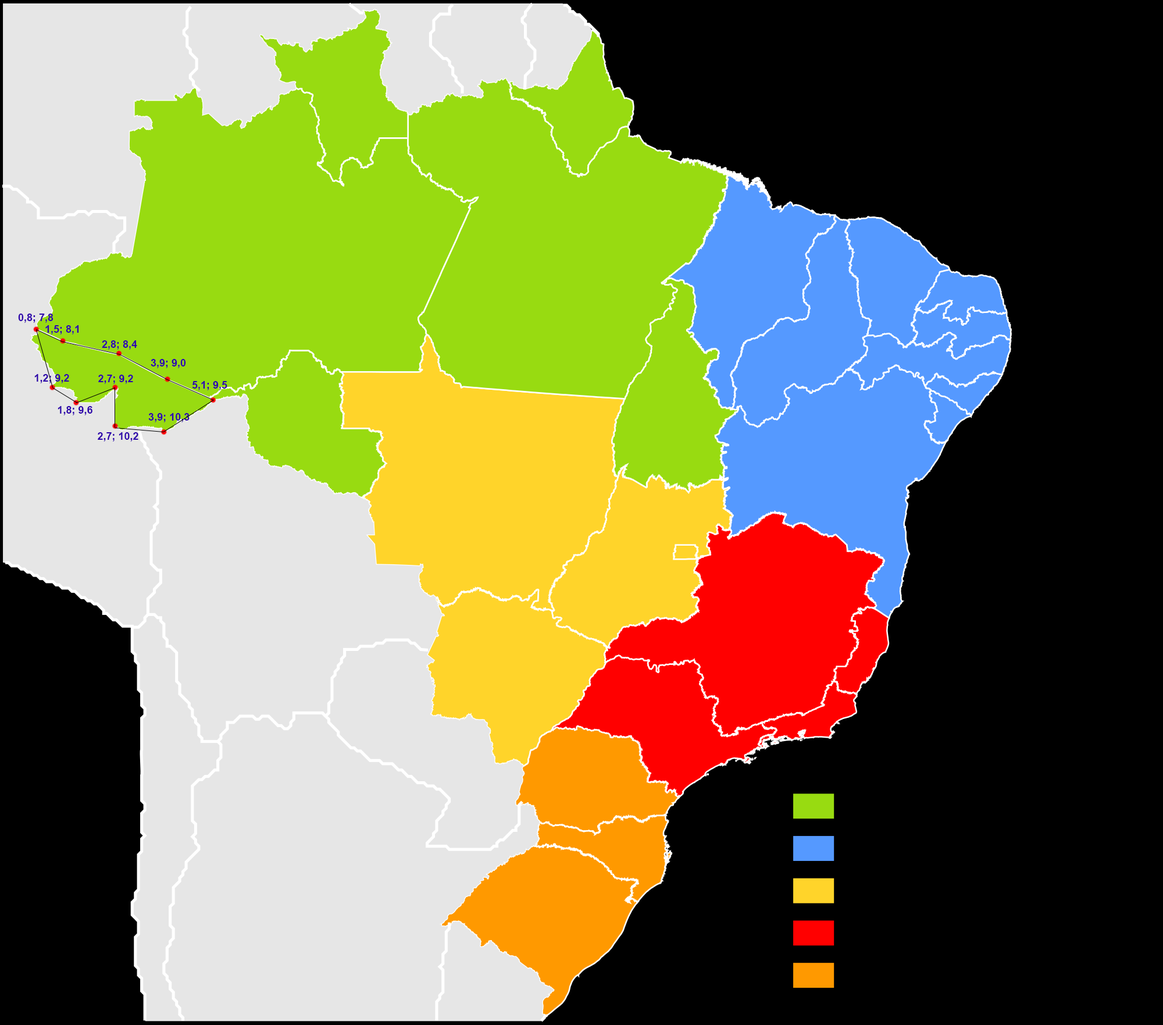
<style>
.page{position:relative;width:1163px;height:1025px;background:#000000}
.page>*{position:absolute;margin:0}
.t1{font:10.5px "Arial-BoldMT";color:#2f03ab}
</style>
<div class="page">
<p class="t1" style="left:18px;top:314px;width:36px;height:9px">0,8; 7,8</p>
<p class="t1" style="left:45px;top:325px;width:34px;height:9px">1,5; 8,1</p>
<p class="t1" style="left:102px;top:340px;width:35px;height:10px">2,8; 8,4</p>
<p class="t1" style="left:151px;top:359px;width:35px;height:9px">3,9; 9,0</p>
<p class="t1" style="left:34px;top:374px;width:35px;height:9px">1,2; 9,2</p>
<p class="t1" style="left:98px;top:375px;width:35px;height:9px">2,7; 9,2</p>
<p class="t1" style="left:192px;top:381px;width:35px;height:9px">5,1; 9,5</p>
<p class="t1" style="left:58px;top:406px;width:34px;height:9px">1,8; 9,6</p>
<p class="t1" style="left:148px;top:413px;width:42px;height:9px">3,9; 10,3</p>
<p class="t1" style="left:98px;top:432px;width:40px;height:10px">2,7; 10,2</p>
</div>
